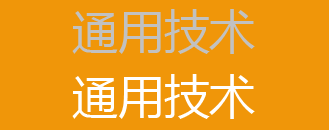
<style>
.page{position:relative;width:329px;height:130px;background:#f09609}
.page>*{position:absolute;margin:0}
.t1{font:45.8px "MicrosoftYaHei";color:#c1c1c1}
.t2{font:45.8px "MicrosoftYaHei";color:#ffffff}
</style>
<div class="page">
<p class="t1" style="left:72px;top:9px;width:183px;height:45px">通用技术</p>
<p class="t2" style="left:72px;top:74px;width:183px;height:45px">通用技术</p>
</div>
